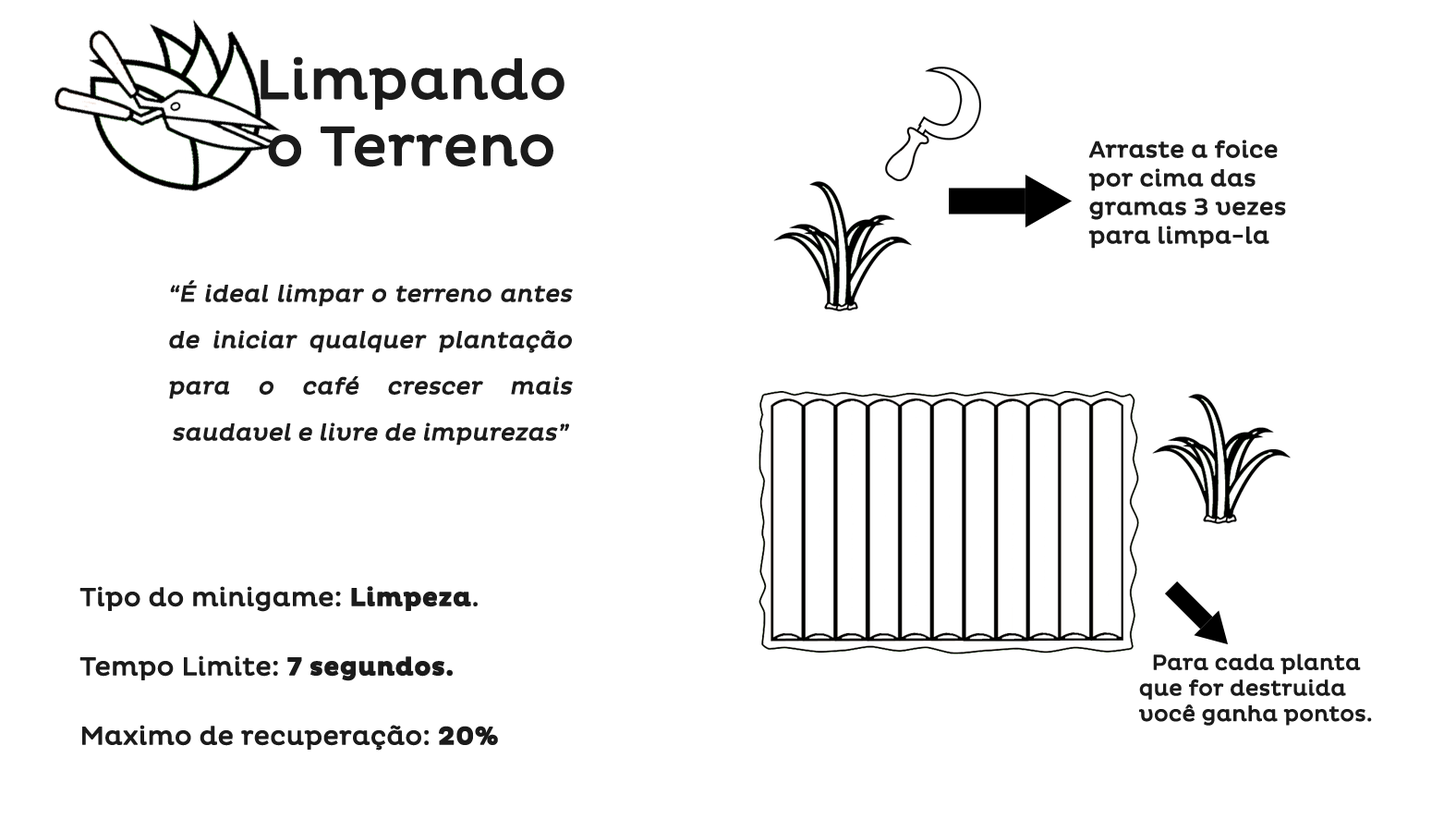
<style>
.page{position:relative;width:1456px;height:819px;background:#ffffff}
.page>*{position:absolute;margin:0}
.t1{font:55.4px "PlutoRegular";color:#1b1b1b;font-weight:bold}
.t2{font:23.1px/28.6px "PlutoRegular";color:#1b1b1b;font-weight:bold}
.t3{font:23.1px/46.2px "PlutoRegular";color:#1b1b1b;font-weight:bold;font-style:italic}
.t4{font:25.5px/69.3px "PlutoRegular";color:#1b1b1b;font-weight:bold}
.t5{font:25.5px/69.3px "PlutoBold";color:#1b1b1b;font-weight:bold}
.t6{font:21.3px "PlutoRegular";color:#1b1b1b;font-weight:bold}
</style>
<div class="page">
<p class="t1" style="left:261px;top:56px;width:304px;height:111px;text-align:center">Limpando<br>o Terreno</p>
<p class="t2" style="left:1089px;top:140px;width:197px;height:109px">Arraste a foice por cima das gramas 3 vezes para limpa-la</p>
<p class="t3" style="left:169px;top:280px;width:404px;height:165px;text-align:justify">“É ideal limpar o terreno antes de iniciar qualquer plantação para o café crescer mais saudavel e livre de impurezas”</p>
<p class="t4" style="left:79px;top:586px;width:419px;height:164px">Tipo do minigame: <span class="t5">Limpeza</span>.<br>Tempo Limite: <span class="t5">7 segundos.<br></span>Maximo de recuperação: <span class="t5">20%</span></p>
<p class="t6" style="left:1139px;top:653px;width:233px;height:72px">Para cada planta<br>que for destruida<br>você ganha pontos.</p>
</div>
